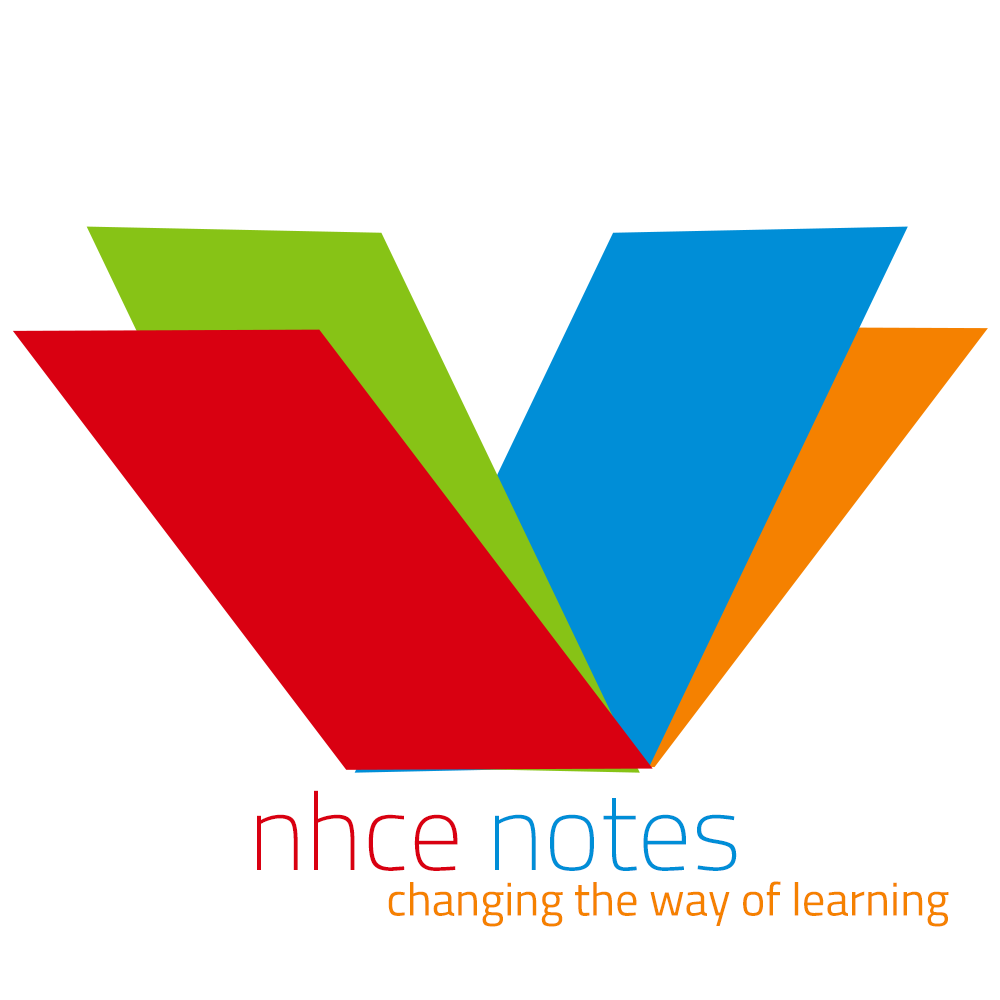
<style>
.page{position:relative;width:1000px;height:1000px;background:#ffffff}
.page>*{position:absolute;margin:0}
.t1{font:108px "TitilliumWeb-Thin";color:#008ed7}
.t2{font:108px "TitilliumWeb-Thin";color:#d90011}
.t3{font:46.7px "TitilliumWeb-Regular";color:#f58100}
</style>
<div class="page">
<p class="t1" style="left:257px;top:790px;width:480px;height:81px"><span class="t2">nhce </span>notes</p>
<p class="t3" style="left:388px;top:881px;width:561px;height:46px">changing the way of learning</p>
</div>
